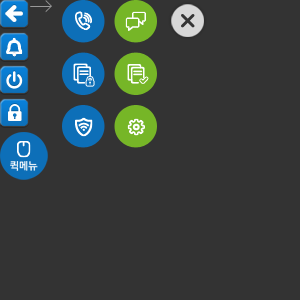
<style>
.page{position:relative;width:300px;height:300px;background:#333333}
.page>*{position:absolute;margin:0}
.t1{font:10.5px "RixMGoB";letter-spacing:-0.02em;color:#ffffff}
</style>
<div class="page">
<p class="t1" style="left:10px;top:161px;width:28px;height:10px">퀵메뉴</p>
</div>
